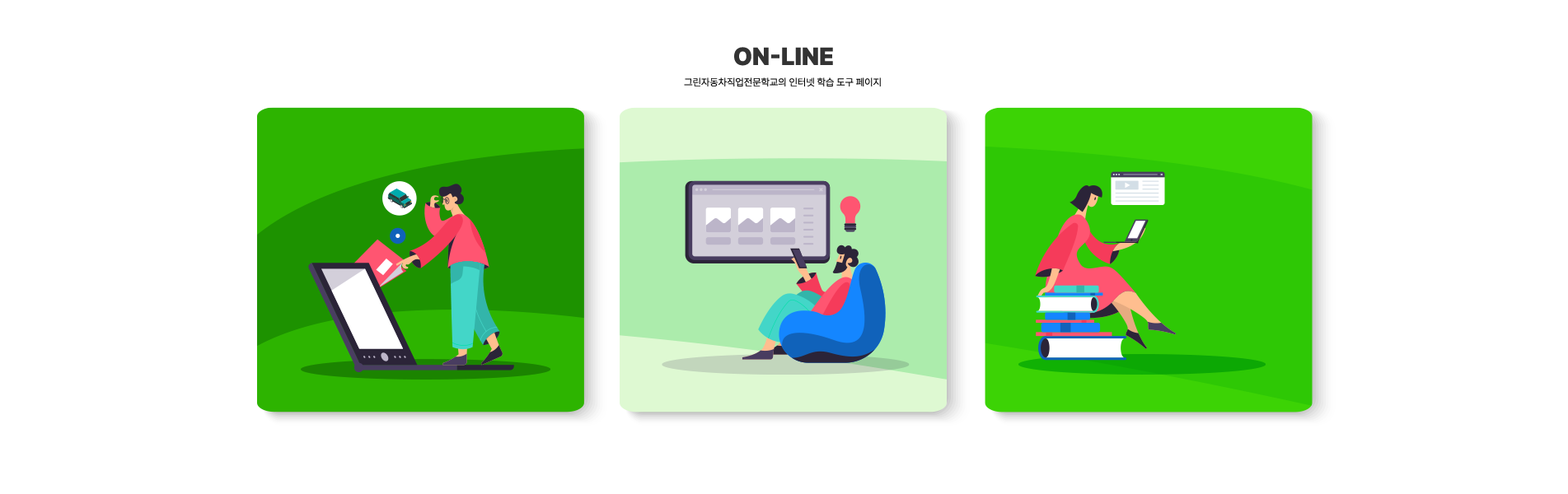
<style>
.page{position:relative;width:1568px;height:494px;background:#ffffff}
.page>*{position:absolute;margin:0}
.t1{font:24.7px "Pretendard-Black";color:#333333}
.t2{font:9.9px "Pretendard-Light";color:#000000}
</style>
<div class="page">
<p class="t1" style="left:734px;top:47px;width:99px;height:19px">ON-LINE</p>
<p class="t2" style="left:684px;top:77px;width:197px;height:10px">그린자동차직업전문학교의 인터넷 학습 도구 페이지</p>
</div>
